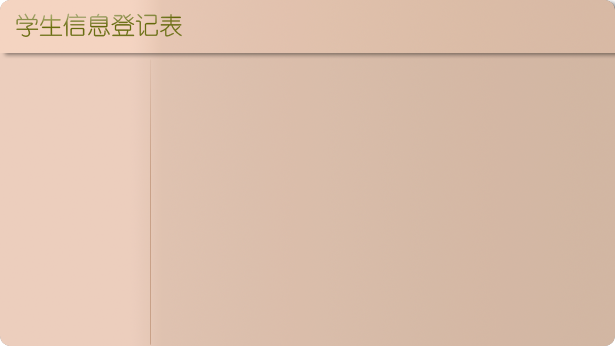
<style>
.page{position:relative;width:615px;height:346px}
.page>*{position:absolute;margin:0}
.t1{font:24px "YouYuan";color:#6b7016}
</style>
<div class="page">
<p class="t1" style="left:16px;top:13px;width:166px;height:24px">学生信息登记表</p>
</div>
